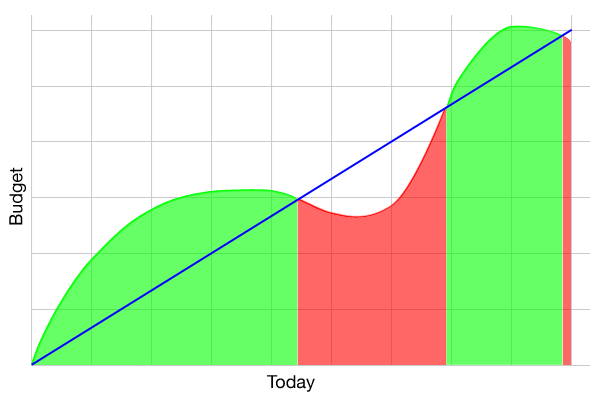
<style>
.page{position:relative;width:600px;height:400px;background:#ffffff}
.page>*{position:absolute;margin:0}
.t1{font:18px "HelveticaNeue";color:#000000}
</style>
<div class="page">
<p class="t1" style="left:9px;top:167px;width:17px;height:58px;rotate:-90deg">Budget</p>
<p class="t1" style="left:267px;top:375px;width:48px;height:17px">Today</p>
</div>
